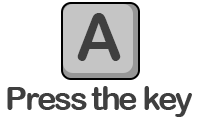
<style>
.page{position:relative;width:200px;height:120px;background:#ffffff}
.page>*{position:absolute;margin:0}
.t1{font:64.2px "ArialRoundedMTBold";letter-spacing:-0.075em;color:#3f3f3f}
.t2{font:33.3px "ArialRoundedMTBold";letter-spacing:-0.075em;color:#3f3f3f}
</style>
<div class="page">
<p class="t1" style="left:77px;top:13px;width:44px;height:48px">A</p>
<p class="t2" style="left:7px;top:86px;width:185px;height:31px">Press the key</p>
</div>
